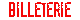
<style>
.page{position:relative;width:80px;height:20px;background:#ffffff}
.page>*{position:absolute;margin:0}
.t1{font:15.2px "TopSecretRegularSWFTE";color:#f40808}
</style>
<div class="page">
<p class="t1" style="left:9px;top:2px;width:62px;height:15px">Billeterie</p>
</div>
